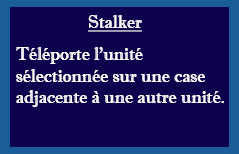
<style>
.page{position:relative;width:239px;height:154px;background:#0d004c}
.page>*{position:absolute;margin:0}
.t1{font:18px "ImprintMT-Shadow";color:#ffffff;text-decoration:underline}
.t2{font:18px "ImprintMT-Shadow";color:#ffffff}
</style>
<div class="page">
<p class="t1" style="left:88px;top:15px;width:54px;height:17px">Stalker</p>
<p class="t2" style="left:16px;top:47px;width:208px;height:60px">Téléporte l’unité<br>sélectionnée sur une case<br>adjacente à une autre unité.</p>
</div>
